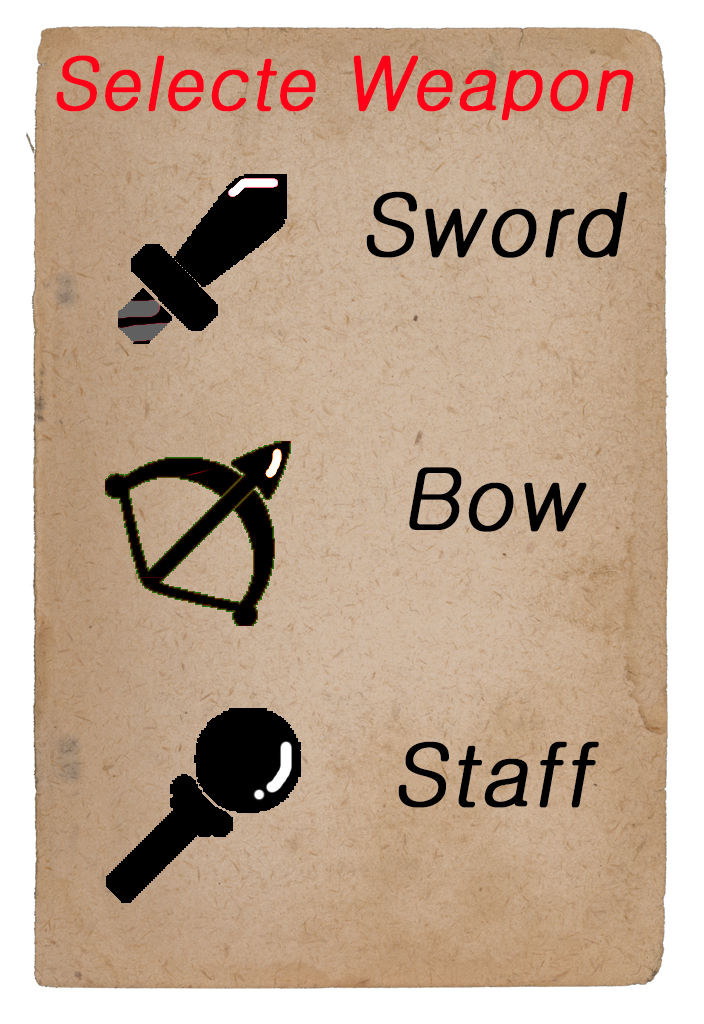
<style>
.page{position:relative;width:704px;height:1024px}
.page>*{position:absolute;margin:0}
.t1{font:73px "Gulim";color:#ff0019;font-weight:bold;font-style:italic}
.t2{font:86px "Gulim";color:#000000;font-weight:bold;font-style:italic}
</style>
<div class="page">
<p class="t1" style="left:56px;top:55px;width:578px;height:66px">Selecte Weapon</p>
<p class="t2" style="left:366px;top:191px;width:262px;height:67px">Sword</p>
<p class="t2" style="left:409px;top:467px;width:178px;height:65px">Bow</p>
<p class="t2" style="left:398px;top:741px;width:201px;height:67px">Staff</p>
</div>
